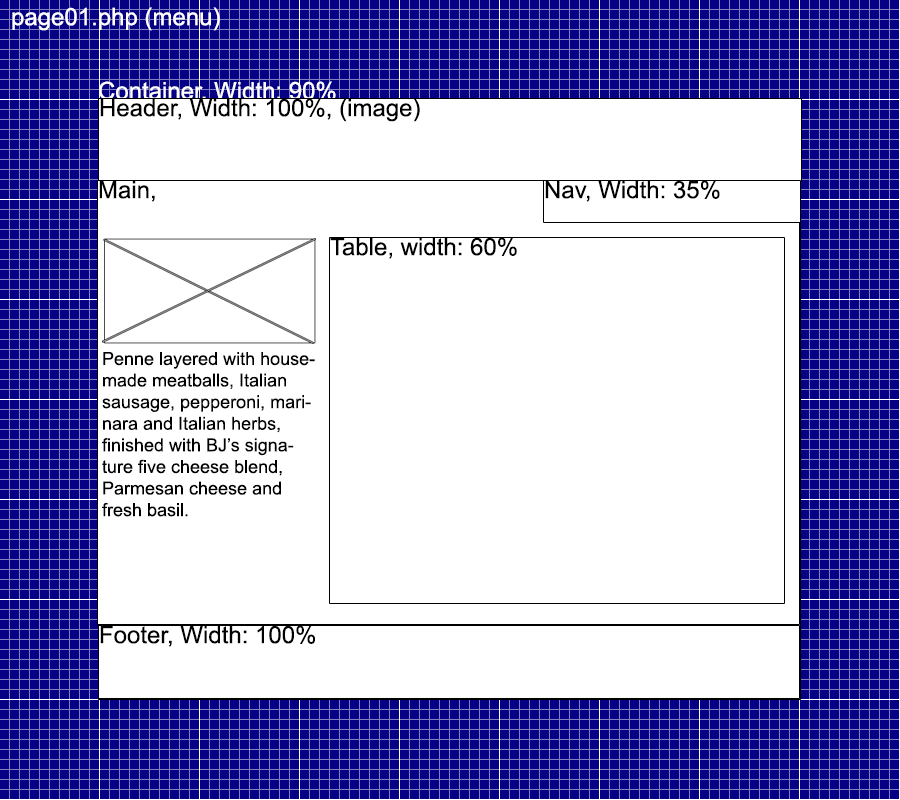
<style>
.page{position:relative;width:900px;height:800px;background:#ffffff}
.page>*{position:absolute;margin:0}
.t1{font:24px "ArialMT";color:#ffffff}
.t2{font:24px "ArialMT";color:#000000}
.t3{font:18px "ArialMT";color:#000000}
</style>
<div class="page">
<p class="t1" style="left:12px;top:7px;width:208px;height:24px">page01.php (menu)</p>
<p class="t1" style="left:99px;top:81px;width:237px;height:22px">Container, Width: 90%</p>
<p class="t2" style="left:100px;top:98px;width:320px;height:24px">Header, Width: 100%, (image)</p>
<p class="t2" style="left:99px;top:181px;width:56px;height:21px">Main,</p>
<p class="t2" style="left:545px;top:180px;width:175px;height:22px">Nav, Width: 35%</p>
<p class="t2" style="left:330px;top:237px;width:187px;height:22px">Table, width: 60%</p>
<p class="t3" style="left:102px;top:352px;width:213px;height:165px">Penne layered with housemade meatballs, Italian sausage, pepperoni, marinara and Italian herbs, finished with BJ’s signature five cheese blend, Parmesan cheese and fresh basil.</p>
<p class="t2" style="left:100px;top:625px;width:215px;height:22px">Footer, Width: 100%</p>
</div>
